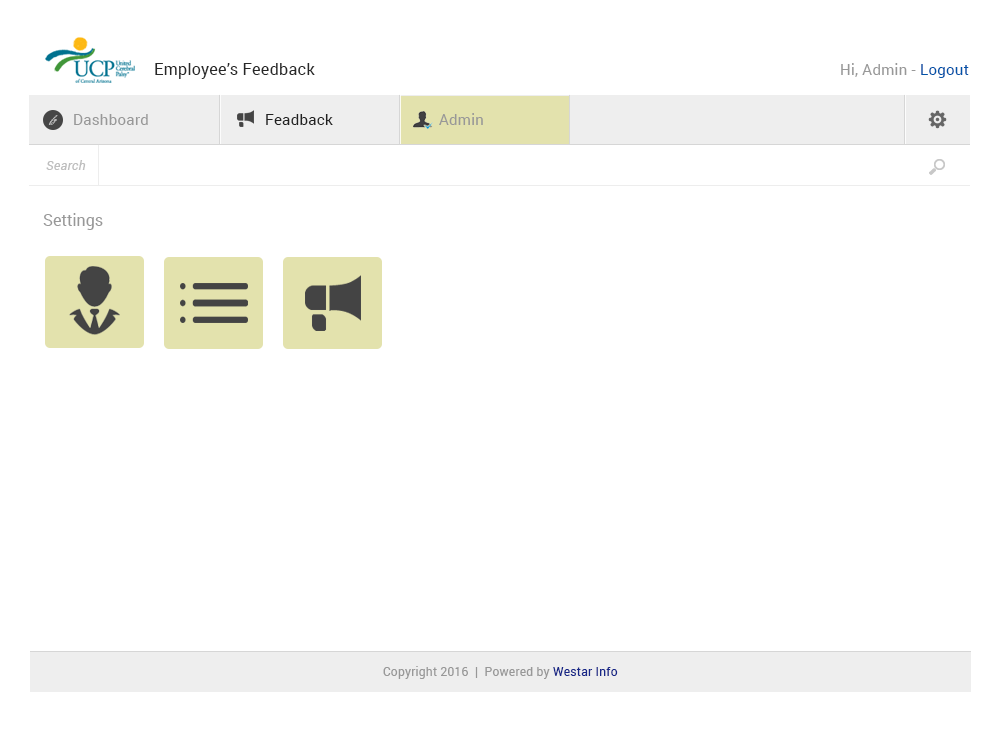
<style>
.page{position:relative;width:1000px;height:746px;background:#ffffff}
.page>*{position:absolute;margin:0}
.t1{font:16px "Roboto-Regular";letter-spacing:0.02em;color:#282828}
.t2{font:15px "Roboto-Regular";letter-spacing:0.02em;color:#989898}
.t3{font:15px "Roboto-Regular";letter-spacing:0.02em;color:#0053a8}
.t4{font:10px "BickhamScriptPro-Regular";letter-spacing:0.02em;color:#bababa}
.t5{font:15px "Roboto-Regular";letter-spacing:0.02em;color:#212121}
.t6{font:13px "Roboto-Italic";letter-spacing:0.02em;color:#bebebe}
.t7{font:16px "Roboto-Regular";color:#989898}
.t8{font:12px "Roboto-Regular";letter-spacing:0.02em;color:#989898}
.t9{font:12px "Roboto-Regular";letter-spacing:0.02em;color:#172788}
</style>
<div class="page">
<p class="t1" style="left:155px;top:63px;width:160px;height:16px">Employee’s Feedback</p>
<p class="t2" style="left:841px;top:63px;width:128px;height:15px">Hi, Admin - <span class="t3">Logout</span></p>
<p class="t2" style="left:439px;top:113px;width:44px;height:12px">Admin</p>
<p class="t4" style="left:48px;top:115px;width:10px;height:10px">fg</p>
<p class="t2" style="left:74px;top:114px;width:74px;height:11px">Dashboard</p>
<p class="t5" style="left:266px;top:114px;width:67px;height:11px">Feadback</p>
<p class="t6" style="left:46px;top:160px;width:40px;height:10px">Search</p>
<p class="t7" style="left:43px;top:213px;width:60px;height:17px">Settings</p>
<p class="t8" style="left:383px;top:666px;width:235px;height:13px">Copyright 2016  |  Powered by <span class="t9">Westar Info</span></p>
</div>
